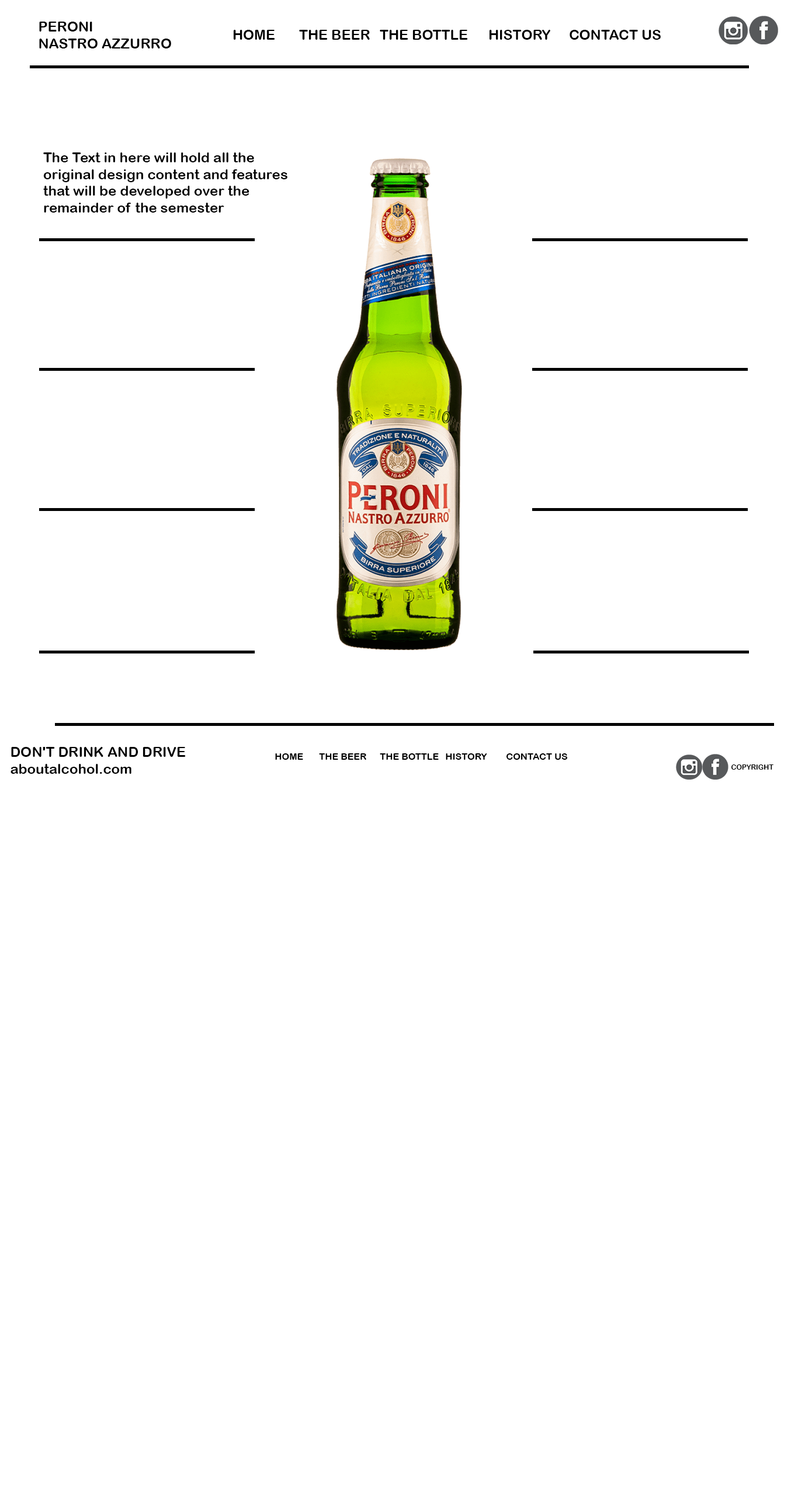
<style>
.page{position:relative;width:798px;height:1495px;background:#ffffff}
.page>*{position:absolute;margin:0}
.t1{font:14px "ArialRoundedMTBold";color:#000000}
.t2{font:9.3px "ArialRoundedMTBold";color:#000000}
.t3{font:7px "ArialRoundedMTBold";color:#000000}
</style>
<div class="page">
<p class="t1" style="left:39px;top:22px;width:132px;height:26px">PERONI<br>NASTRO AZZURRO</p>
<p class="t1" style="left:233px;top:30px;width:427px;height:10px">HOME  THE BEER  THE BOTTLE  HISTORY  CONTACT US</p>
<p class="t1" style="left:43px;top:152px;width:244px;height:61px">The Text in here will hold all the<br>original design content and features <br>that will be developed over the <br>remainder of the semester</p>
<p class="t1" style="left:11px;top:747px;width:175px;height:27px">DON'T DRINK AND DRIVE<br>aboutalcohol.com</p>
<p class="t2" style="left:275px;top:753px;width:293px;height:7px">HOME  THE BEER  THE BOTTLE  HISTORY  CONTACT US</p>
<p class="t3" style="left:731px;top:764px;width:42px;height:6px">COPYRIGHT</p>
</div>
